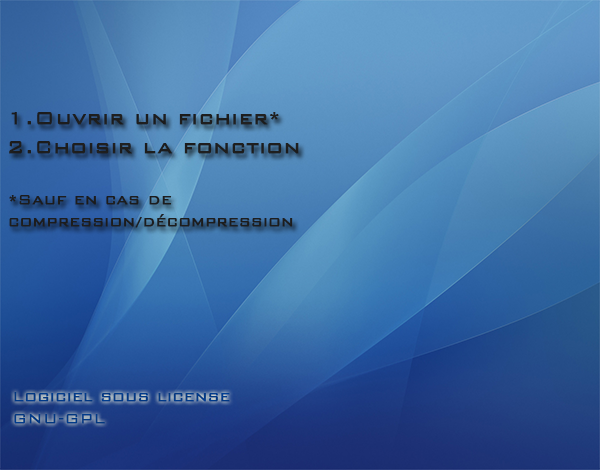
<style>
.page{position:relative;width:600px;height:470px}
.page>*{position:absolute;margin:0}
.t1{font:24px "BankGothicBT-Light";color:#1d1d1d;font-weight:bold}
.t2{font:24px "BankGothicBT-Light";color:#1e1e1e;font-weight:bold}
.t3{font:18px "BankGothicBT-Light";color:#1d1d1d;font-weight:bold}
</style>
<div class="page">
<p class="t1" style="left:11px;top:112px;width:268px;height:13px">1.Ouvrir un fichier*</p>
<p class="t2" style="left:9px;top:141px;width:290px;height:13px">2.Choisir la fonction</p>
<p class="t3" style="left:9px;top:195px;width:284px;height:33px">*Sauf en cas de <br>compression/décompression</p>
</div>
